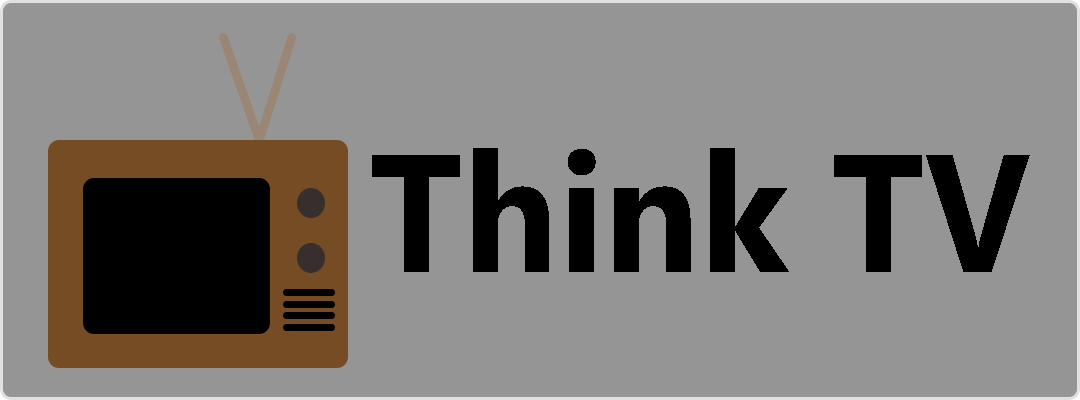
<style>
.page{position:relative;width:1080px;height:400px;background:#959595}
.page>*{position:absolute;margin:0}
.t1{font:167.3px "MicrosoftPhagsPa-Bold";color:#000000;scale:0.95 1}
</style>
<div class="page">
<p class="t1" style="left:372px;top:148px;width:658px;height:124px">Think TV</p>
</div>
